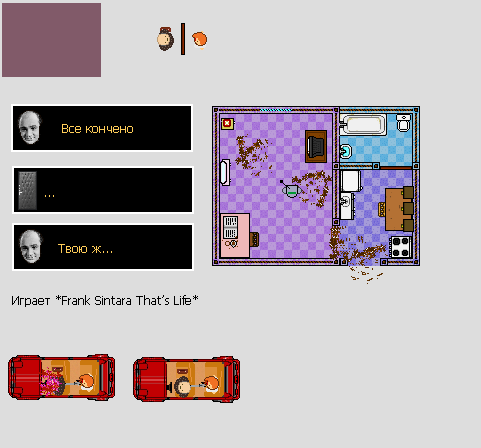
<style>
.page{position:relative;width:481px;height:448px;background:#dddddd}
.page>*{position:absolute;margin:0}
.t1{font:12px "Tahoma";color:#ffcd59}
.t2{font:12px "Tahoma";color:#000000}
</style>
<div class="page">
<p class="t1" style="left:62px;top:124px;width:71px;height:9px">Все кончено</p>
<p class="t1" style="left:45px;top:195px;width:9px;height:2px">...</p>
<p class="t1" style="left:58px;top:244px;width:54px;height:9px">Твою ж...</p>
<p class="t2" style="left:12px;top:295px;width:186px;height:12px">Играет *Frank Sintara That’s Life*</p>
</div>
